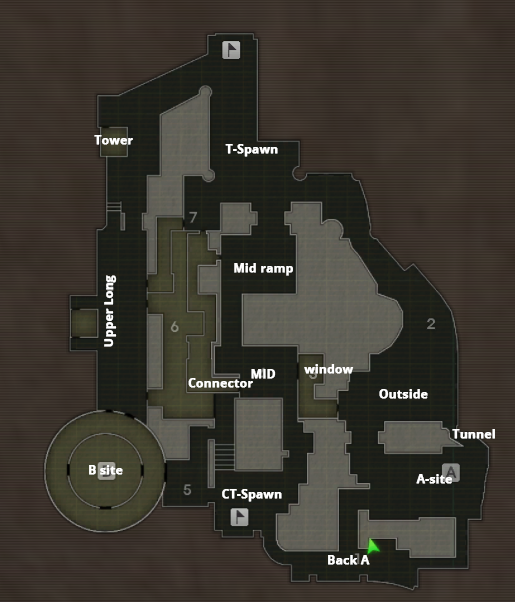
<style>
.page{position:relative;width:515px;height:602px}
.page>*{position:absolute;margin:0}
.t1{font:12px "OpenSans-Bold";color:#ffffff;font-weight:bold}
</style>
<div class="page">
<p class="t1" style="left:94px;top:135px;width:39px;height:10px">Tower</p>
<p class="t1" style="left:225px;top:144px;width:53px;height:13px">T-Spawn</p>
<p class="t1" style="left:234px;top:263px;width:59px;height:13px">Mid ramp</p>
<p class="t1" style="left:104px;top:275px;width:13px;height:72px;rotate:-90deg">Upper Long</p>
<p class="t1" style="left:304px;top:364px;width:50px;height:10px">window</p>
<p class="t1" style="left:251px;top:369px;width:25px;height:10px">MID</p>
<p class="t1" style="left:188px;top:378px;width:65px;height:10px">Connector</p>
<p class="t1" style="left:379px;top:389px;width:49px;height:10px">Outside</p>
<p class="t1" style="left:452px;top:429px;width:43px;height:10px">Tunnel</p>
<p class="t1" style="left:89px;top:465px;width:34px;height:10px">B site</p>
<p class="t1" style="left:416px;top:474px;width:36px;height:10px">A-site</p>
<p class="t1" style="left:222px;top:489px;width:60px;height:13px">CT-Spawn</p>
<p class="t1" style="left:328px;top:555px;width:42px;height:10px">Back A</p>
</div>
